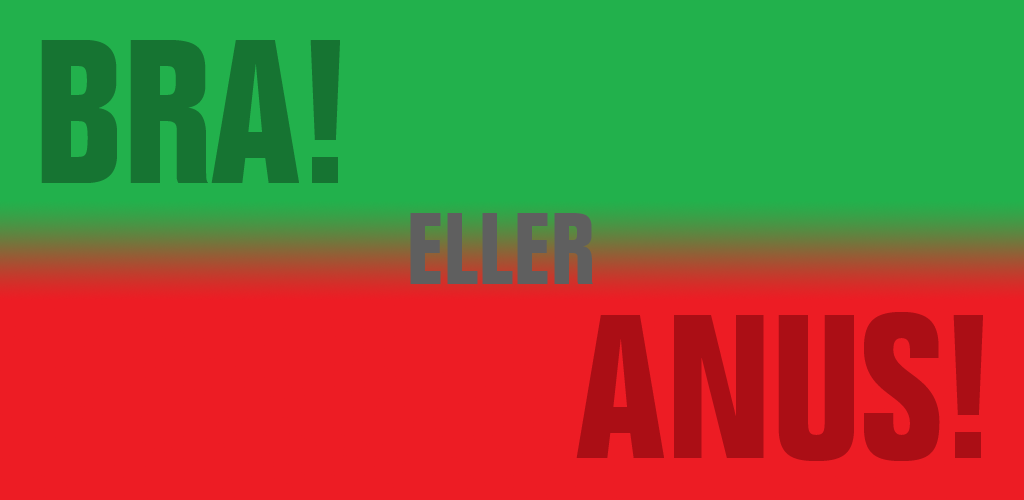
<style>
.page{position:relative;width:1024px;height:500px;background:#22b14c}
.page>*{position:absolute;margin:0}
.t1{font:200px "Folio-BoldCondensed";color:#167432}
.t2{font:100px "Folio-BoldCondensed";color:#5f5f5f}
.t3{font:200px "Folio-BoldCondensed";color:#ab0e15}
</style>
<div class="page">
<p class="t1" style="left:41px;top:40px;width:299px;height:143px">BRA!</p>
<p class="t2" style="left:410px;top:213px;width:183px;height:71px">ELLER</p>
<p class="t3" style="left:576px;top:312px;width:407px;height:149px">ANUS!</p>
</div>
